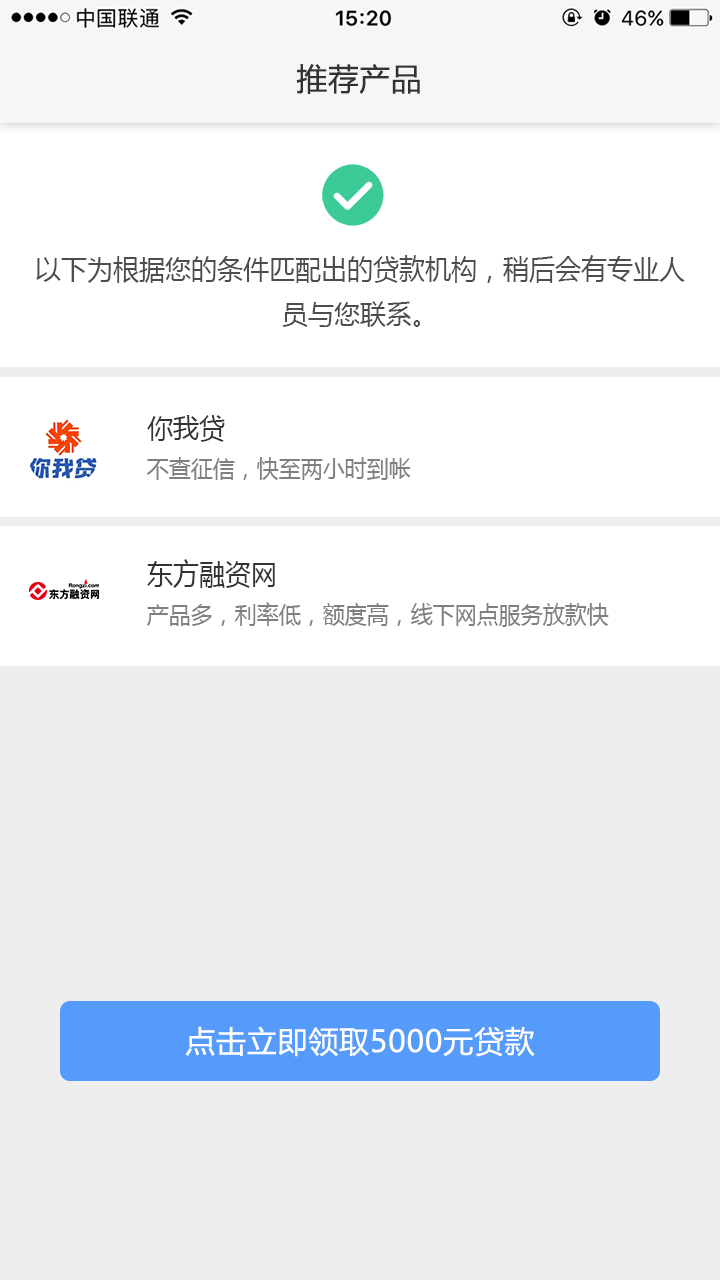
<style>
.page{position:relative;width:720px;height:1280px;background:#eeeeee}
.page>*{position:absolute;margin:0}
.t1{font:30.7px "MicrosoftYaHei";letter-spacing:0.025em;color:#333333}
.t2{font:28.3px "MicrosoftYaHei";color:#4d4d4d;scale:0.92 1}
.t3{font:28.3px "MicrosoftYaHei";color:#333333;scale:0.92 1}
.t4{font:24px "MicrosoftYaHei";color:#808080;scale:0.92 1}
.t5{font:30px "MicrosoftYaHei";letter-spacing:0.025em;color:#fefefe}
</style>
<div class="page">
<p class="t1" style="left:296px;top:64px;width:124px;height:30px">推荐产品</p>
<p class="t2" style="left:36px;top:255px;width:649px;height:72px;text-align:center">以下为根据您的条件匹配出的贷款机构，稍后会有专业人<br>员与您联系。</p>
<p class="t3" style="left:147px;top:415px;width:78px;height:27px">你我贷</p>
<p class="t4" style="left:146px;top:457px;width:265px;height:23px">不查征信，快至两小时到帐</p>
<p class="t3" style="left:147px;top:559px;width:128px;height:29px">东方融资网</p>
<p class="t4" style="left:147px;top:602px;width:462px;height:25px">产品多，利率低，额度高，线下网点服务放款快</p>
<p class="t5" style="left:185px;top:1026px;width:350px;height:31px">点击立即领取5000元贷款</p>
</div>
